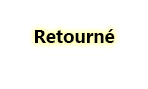
<style>
.page{position:relative;width:148px;height:89px;background:#ffffff}
.page>*{position:absolute;margin:0}
.t1{font:18.7px "LaoUI-Bold";color:#000000}
</style>
<div class="page">
<p class="t1" style="left:35px;top:29px;width:80px;height:14px">Retourné</p>
</div>
